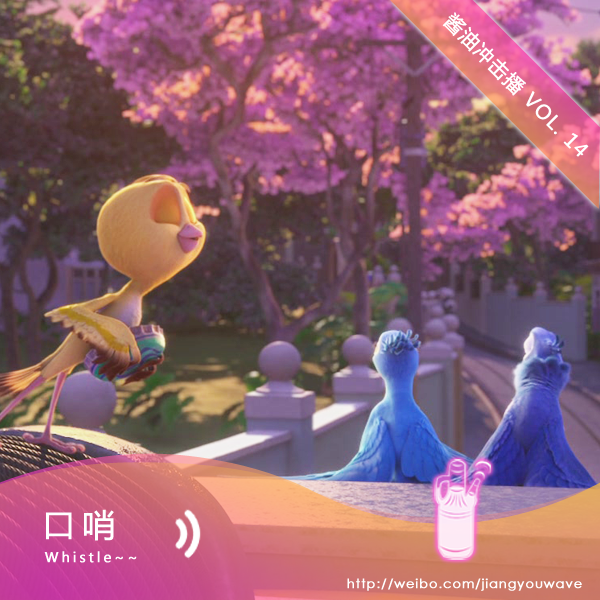
<style>
.page{position:relative;width:600px;height:600px}
.page>*{position:absolute;margin:0}
.t1{font:19.2px "MicrosoftYaHei";letter-spacing:0.05em;color:#ffffff;font-weight:bold}
.t2{font:32px "MicrosoftYaHei";letter-spacing:0.2em;color:#ffffff;font-weight:bold}
.t3{font:13.3px "MicrosoftYaHei";letter-spacing:0.2em;color:#ffffff;font-weight:bold}
.t4{font:12.8px "CenturyGothic";letter-spacing:0.05em;color:#ffffff;font-weight:bold}
</style>
<div class="page">
<p class="t1" style="left:442px;top:12px;width:147px;height:145px;rotate:45deg">酱油冲击播 VOL. 14</p>
<p class="t2" style="left:46px;top:509px;width:68px;height:32px">口哨</p>
<p class="t3" style="left:44px;top:551px;width:93px;height:12px">Whistle~~</p>
<p class="t4" style="left:347px;top:578px;width:235px;height:13px">http://weibo.com/jiangyouwave</p>
</div>
